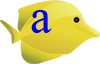
<style>
.page{position:relative;width:100px;height:64px;background:#ffffff}
.page>*{position:absolute;margin:0}
.t1{font:48px "TimesNewRomanPSMT";color:#0000ff}
</style>
<div class="page">
<p class="t1" style="left:31px;top:10px;width:21px;height:23px">a</p>
</div>
